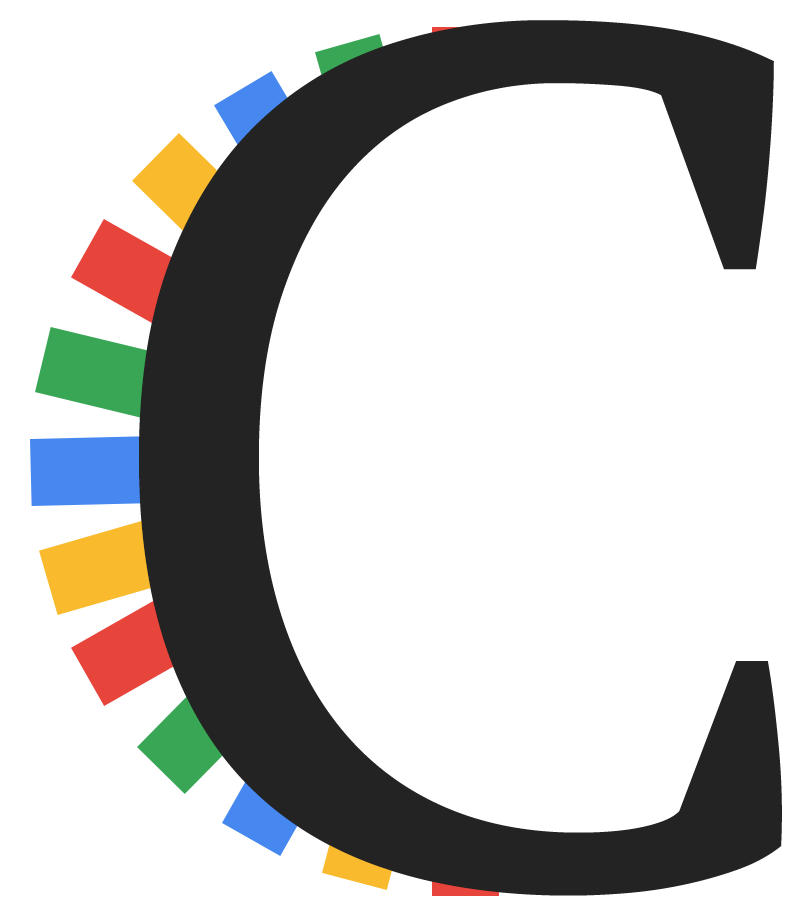
<style>
.page{position:relative;width:801px;height:917px;background:#ffffff}
.page>*{position:absolute;margin:0}
.t1{font:1208.9px "PTSerif-Regular";color:#232323}
</style>
<div class="page">
<p class="t1" style="left:138px;top:20px;width:644px;height:876px">C</p>
</div>
